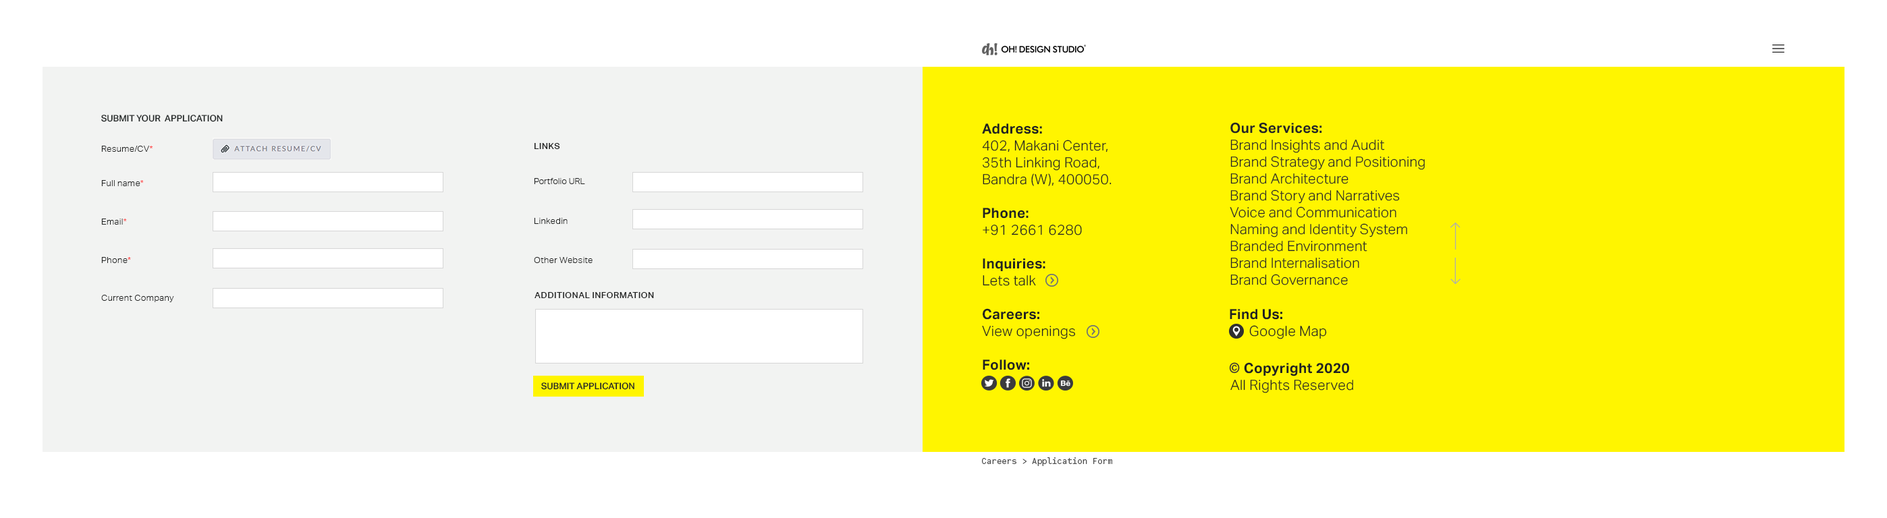
<style>
.page{position:relative;width:1887px;height:518px;background:#ffffff}
.page>*{position:absolute;margin:0}
.t1{font:9px "AktivGroteskW06-Medium";color:#212525}
.t2{font:14.1px/16.9px "AktivGroteskW06-Light";letter-spacing:0.015em;color:#202222}
.t3{font:14.1px/16.9px "AktivGroteskW06-Bold";letter-spacing:0.015em;color:#202222}
.t4{font:14.1px/16.9px "AktivGroteskW06-Light";letter-spacing:0.01em;color:#252626}
.t5{font:14.1px/16.9px "AktivGroteskW06-Bold";letter-spacing:0.01em;color:#252626}
.t6{font:9px "AktivGroteskW06-Light";letter-spacing:0.015em;color:#212222}
.t7{font:9px "AktivGroteskW06-Light";letter-spacing:0.015em;color:#ff3030}
.t8{font:9px "AktivGroteskW06-Medium";letter-spacing:0.015em;color:#212222}
.t9{font:8.4px "AktivGroteskW06-Light";letter-spacing:0.015em;color:#212222}
.t10{font:14px/16.8px "AktivGroteskW06-Light";letter-spacing:0.015em;color:#202222}
.t11{font:14px/16.8px "AktivGroteskW06-Bold";letter-spacing:0.015em;color:#202222}
.t12{font:14px/16.8px "AktivGroteskW06-Medium";letter-spacing:0.015em;color:#202222}
.t13{font:9px "CodeSaver-Regular";color:#4d4d4d}
</style>
<div class="page">
<p class="t1" style="left:101px;top:115px;width:122px;height:7px">SUBMIT YOUR  APPLICATION</p>
<p class="t2" style="left:982px;top:124px;width:130px;height:247px"><span class="t3">Address:<br></span>402, Makani Center,<br>35th Linking Road,<br>Bandra (W), 400050.<br><br><span class="t3">Phone:<br></span>+91 2661 6280<br><br><span class="t3">Inquiries: <br></span>Lets talk<br><br><span class="t3">Careers:<br></span>View openings<br><br><span class="t3">Follow:</span></p>
<p class="t4" style="left:1230px;top:122px;width:195px;height:164px"><span class="t5">Our Services:<br></span>Brand Insights and Audit<br>Brand Strategy and Positioning<br>Brand Architecture<br>Brand Story and Narratives<br>Voice and Communication<br>Naming and Identity System<br>Branded Environment<br>Brand Internalisation<br>Brand Governance</p>
<p class="t6" style="left:101px;top:146px;width:52px;height:6px">Resume/CV<span class="t7">*</span></p>
<p class="t8" style="left:534px;top:143px;width:26px;height:6px">LINKS</p>
<p class="t6" style="left:101px;top:180px;width:43px;height:6px">Full name<span class="t7">*</span></p>
<p class="t9" style="left:534px;top:178px;width:51px;height:6px">Portfolio URL</p>
<p class="t6" style="left:101px;top:219px;width:26px;height:6px">Email<span class="t7">*</span></p>
<p class="t6" style="left:534px;top:218px;width:34px;height:6px">Linkedin URL</p>
<p class="t6" style="left:101px;top:257px;width:30px;height:6px">Phone<span class="t7">*</span></p>
<p class="t6" style="left:534px;top:257px;width:59px;height:6px">Other Website</p>
<p class="t8" style="left:535px;top:292px;width:119px;height:6px">ADDITIONAL INFORMATION</p>
<p class="t6" style="left:101px;top:295px;width:73px;height:7px">Current Company</p>
<p class="t10" style="left:1230px;top:309px;width:97px;height:31px"><span class="t11">Find Us: <br></span>      Google Map</p>
<p class="t10" style="left:1231px;top:362px;width:122px;height:32px"><span class="t12">    </span><span class="t11">Copyright 2020<br></span>All Rights Reserved</p>
<p class="t1" style="left:541px;top:383px;width:94px;height:7px">SUBMIT APPLICATION</p>
<p class="t13" style="left:982px;top:458px;width:130px;height:8px">Careers &gt; Application Form</p>
</div>
